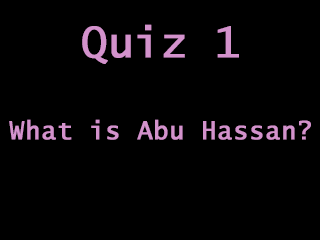
<style>
.page{position:relative;width:320px;height:240px;background:#000000}
.page>*{position:absolute;margin:0}
.t1{font:41.7px "LucidaSans-Typewriter";letter-spacing:0.01em;color:#d392cc;font-weight:bold}
.t2{font:25px "LucidaSans-Typewriter";letter-spacing:0.01em;color:#d392cc;font-weight:bold}
</style>
<div class="page">
<p class="t1" style="left:82px;top:24px;width:157px;height:40px">Quiz 1</p>
<p class="t2" style="left:9px;top:119px;width:302px;height:21px">What is Abu Hassan?</p>
</div>
